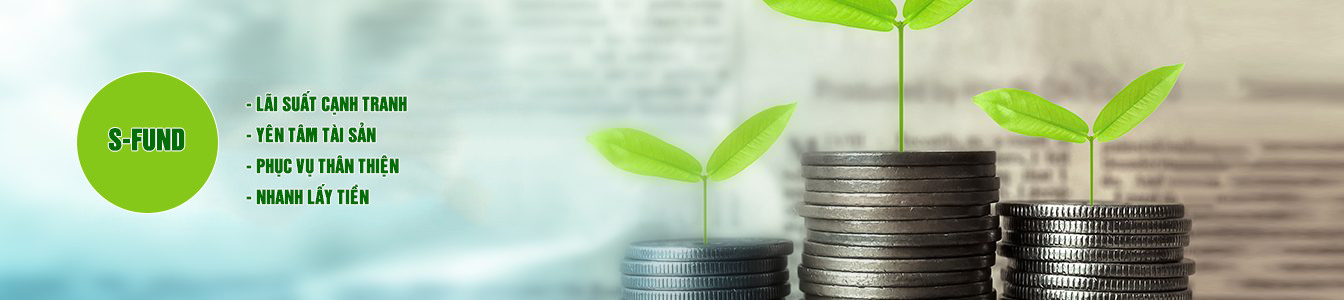
<style>
.page{position:relative;width:1344px;height:300px}
.page>*{position:absolute;margin:0}
.t1{font:18px/31px "UTM-HelvetIns";color:#036d08;text-transform:uppercase;font-weight:bold;scale:0.9 1}
.t2{font:27px "UTM-HelvetIns";color:#036d08;text-transform:uppercase;font-weight:bold;scale:0.9 1}
</style>
<div class="page">
<p class="t1" style="left:246px;top:91px;width:161px;height:114px">- Lãi suất cạnh tranh <br>- Yên tâm tài sản<br>- Phục vụ thân thiện <br>- Nhanh lấy tiền</p>
<p class="t2" style="left:108px;top:128px;width:77px;height:23px">S-fund</p>
</div>
